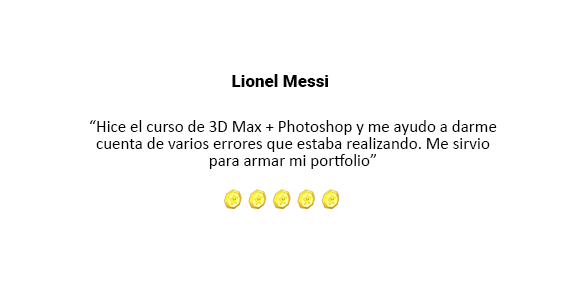
<style>
.page{position:relative;width:564px;height:283px;background:#ffffff}
.page>*{position:absolute;margin:0}
.t1{font:17px "Roboto-Black";color:#000000}
.t2{font:17px/17px "Calibri";color:#000000}
</style>
<div class="page">
<p class="t1" style="left:232px;top:74px;width:97px;height:13px">Lionel Messi</p>
<p class="t2" style="left:90px;top:120px;width:407px;height:49px;text-align:center">“Hice el curso de 3D Max + Photoshop y me ayudo a darme cuenta de varios errores que estaba realizando. Me sirvio para armar mi portfolio”</p>
</div>
